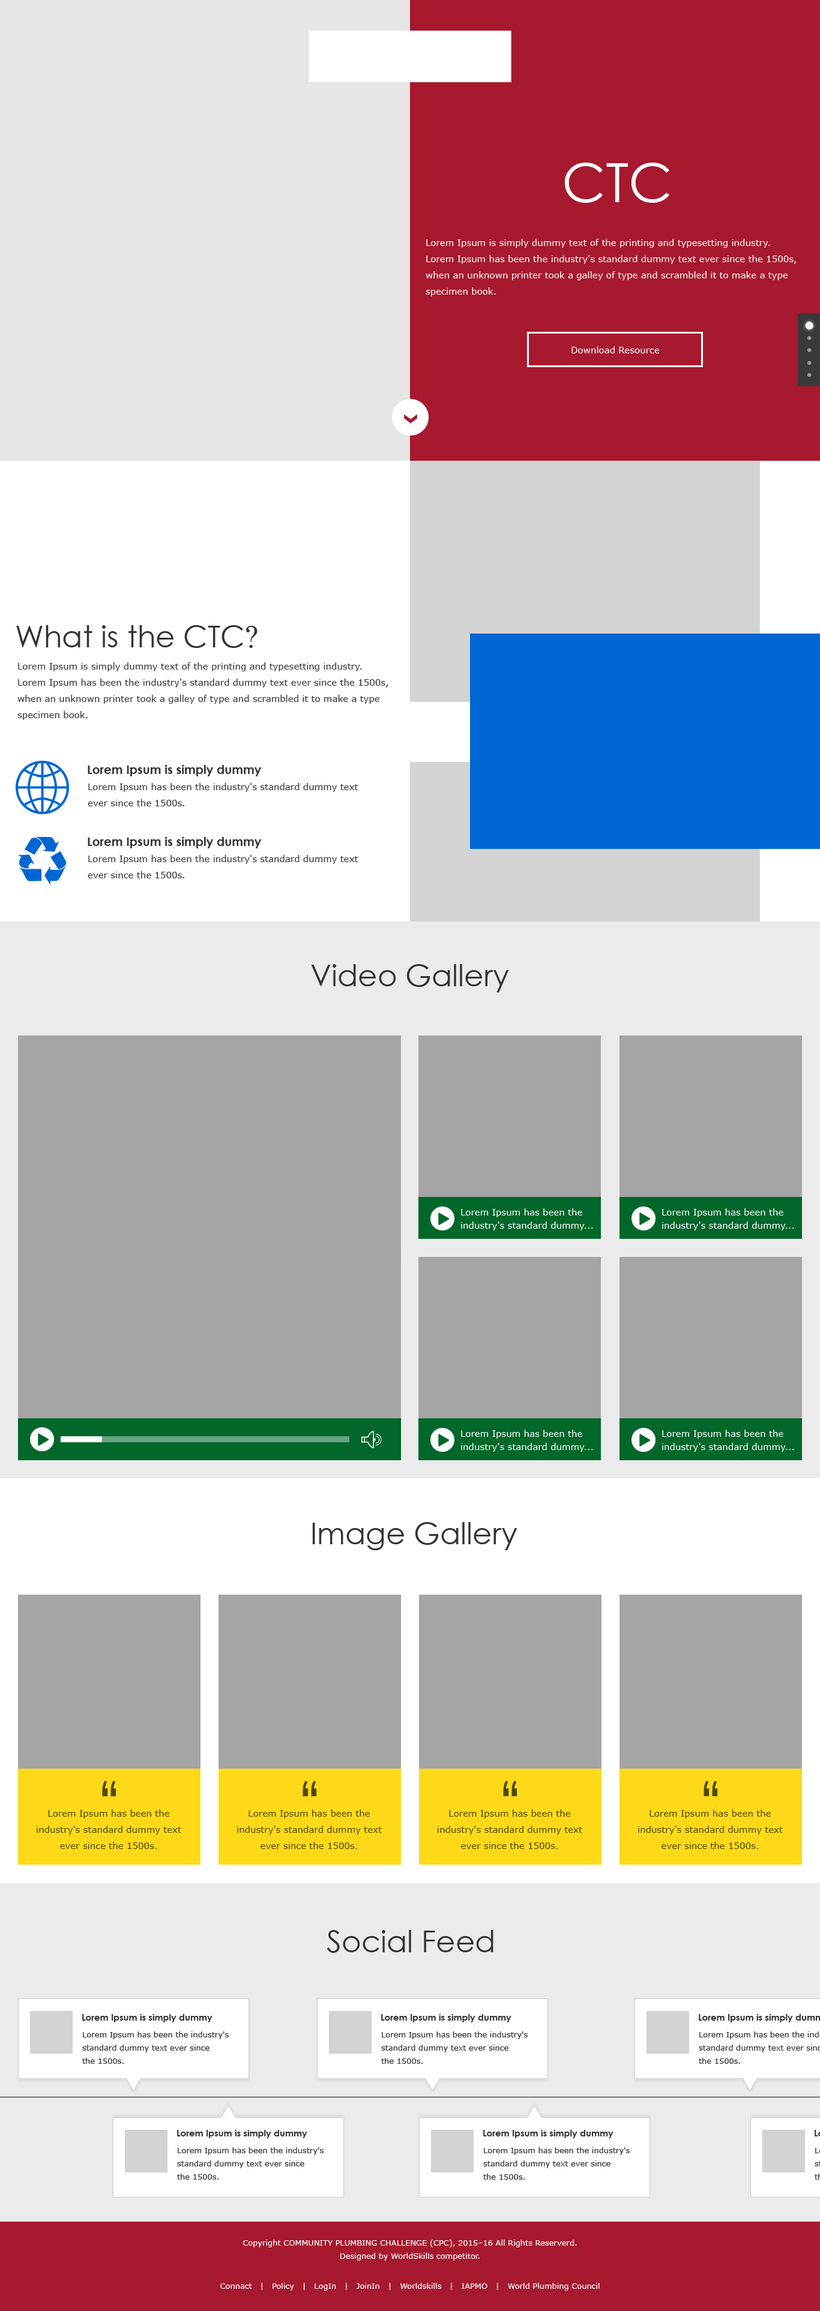
<style>
.page{position:relative;width:820px;height:2311px;background:#ffffff}
.page>*{position:absolute;margin:0}
.t1{font:54px "CenturyGothic";color:#ffffff}
.t2{font:9px/16.2px "Verdana";color:#ffffff}
.t3{font:9px "Verdana";color:#ffffff}
.t4{font:30px "CenturyGothic";color:#333333}
.t5{font:30px "Century";color:#333333}
.t6{font:9px/16.2px "Verdana";color:#333333}
.t7{font:12px "CenturyGothic-Bold";color:#333333}
.t8{font:9px/13.2px "Verdana";color:#ffffff}
.t9{font:58.2px "CenturyGothic";letter-spacing:-0.18em;color:#4c4c00}
.t10{font:9px/16.2px "Verdana";color:#4c4c00}
.t11{font:9px "CenturyGothic-Bold";color:#333333}
.t12{font:7.8px/13.2px "Verdana";color:#333333}
.t13{font:7.8px/13.2px "Verdana";color:#ffffff}
.t14{font:7.8px "Verdana";color:#ffffff}
</style>
<div class="page">
<p class="t1" style="left:564px;top:163px;width:105px;height:40px">CTC</p>
<p class="t2" style="left:425px;top:239px;width:371px;height:57px">Lorem Ipsum is simply dummy text of the printing and typesetting industry.<br>Lorem Ipsum has been the industry's standard dummy text ever since the 1500s,<br>when an unknown printer took a galley of type and scrambled it to make a type<br>specimen book.</p>
<p class="t3" style="left:571px;top:346px;width:88px;height:7px">Download Resource</p>
<p class="t4" style="left:16px;top:625px;width:241px;height:23px">What is the CTC<span class="t5">?</span></p>
<p class="t6" style="left:17px;top:662px;width:371px;height:58px">Lorem Ipsum is simply dummy text of the printing and typesetting industry.<br>Lorem Ipsum has been the industry's standard dummy text ever since the 1500s,<br>when an unknown printer took a galley of type and scrambled it to make a type<br>specimen book.</p>
<p class="t7" style="left:88px;top:765px;width:174px;height:11px">Lorem Ipsum is simply dummy</p>
<p class="t6" style="left:88px;top:783px;width:270px;height:23px">Lorem Ipsum has been the industry's standard dummy text<br>ever since the 1500s.</p>
<p class="t7" style="left:88px;top:837px;width:174px;height:11px">Lorem Ipsum is simply dummy</p>
<p class="t6" style="left:88px;top:855px;width:270px;height:23px">Lorem Ipsum has been the industry's standard dummy text<br>ever since the 1500s.</p>
<p class="t4" style="left:311px;top:964px;width:198px;height:28px">Video Gallery</p>
<p class="t8" style="left:461px;top:1208px;width:132px;height:23px">Lorem Ipsum has been the<br>industry's standard dummy...</p>
<p class="t8" style="left:662px;top:1208px;width:132px;height:23px">Lorem Ipsum has been the<br>industry's standard dummy...</p>
<p class="t8" style="left:461px;top:1430px;width:132px;height:22px">Lorem Ipsum has been the<br>industry's standard dummy...</p>
<p class="t8" style="left:662px;top:1430px;width:132px;height:22px">Lorem Ipsum has been the<br>industry's standard dummy...</p>
<p class="t4" style="left:312px;top:1522px;width:205px;height:28px">Image Gallery</p>
<p class="t9" style="left:102px;top:1781px;width:6px;height:15px">‘</p>
<p class="t9" style="left:110px;top:1781px;width:6px;height:15px">‘</p>
<p class="t9" style="left:302px;top:1781px;width:6px;height:15px">‘</p>
<p class="t9" style="left:311px;top:1781px;width:6px;height:15px">‘</p>
<p class="t9" style="left:503px;top:1781px;width:6px;height:15px">‘</p>
<p class="t9" style="left:511px;top:1781px;width:6px;height:15px">‘</p>
<p class="t9" style="left:703px;top:1781px;width:6px;height:15px">‘</p>
<p class="t9" style="left:712px;top:1781px;width:6px;height:15px">‘</p>
<p class="t10" style="left:37px;top:1810px;width:144px;height:39px;text-align:center">Lorem Ipsum has been the<br>industry's standard dummy text<br>ever since the 1500s.</p>
<p class="t10" style="left:237px;top:1810px;width:145px;height:39px;text-align:center">Lorem Ipsum has been the<br>industry's standard dummy text<br>ever since the 1500s.</p>
<p class="t10" style="left:437px;top:1810px;width:145px;height:39px;text-align:center">Lorem Ipsum has been the<br>industry's standard dummy text<br>ever since the 1500s.</p>
<p class="t10" style="left:638px;top:1810px;width:144px;height:39px;text-align:center">Lorem Ipsum has been the<br>industry's standard dummy text<br>ever since the 1500s.</p>
<p class="t4" style="left:326px;top:1930px;width:167px;height:23px">Social Feed</p>
<p class="t11" style="left:82px;top:2014px;width:130px;height:9px">Lorem Ipsum is simply dummy</p>
<p class="t11" style="left:381px;top:2014px;width:130px;height:9px">Lorem Ipsum is simply dummy</p>
<p class="t12" style="left:82px;top:2032px;width:147px;height:32px">Lorem Ipsum has been the industry's<br>standard dummy text ever since<br>the 1500s.</p>
<p class="t12" style="left:381px;top:2032px;width:146px;height:32px">Lorem Ipsum has been the industry's<br>standard dummy text ever since<br>the 1500s.</p>
<p class="t11" style="left:177px;top:2130px;width:130px;height:8px">Lorem Ipsum is simply dummy</p>
<p class="t11" style="left:483px;top:2130px;width:130px;height:8px">Lorem Ipsum is simply dummy</p>
<p class="t12" style="left:177px;top:2147px;width:146px;height:33px">Lorem Ipsum has been the industry's<br>standard dummy text ever since<br>the 1500s.</p>
<p class="t12" style="left:483px;top:2147px;width:146px;height:33px">Lorem Ipsum has been the industry's<br>standard dummy text ever since<br>the 1500s.</p>
<p class="t13" style="left:242px;top:2240px;width:335px;height:21px;text-align:center">Copyright COMMUNITY PLUMBING CHALLENGE (CPC), 2015–16 All Rights Reserverd.<br>Designed by WorldSkills competitor.</p>
<p class="t14" style="left:220px;top:2283px;width:379px;height:8px">Connact   |   Policy   |   LogIn   |   JoinIn   |   Worldskills   |   IAPMO   |   World Plumbing Council</p>
</div>
